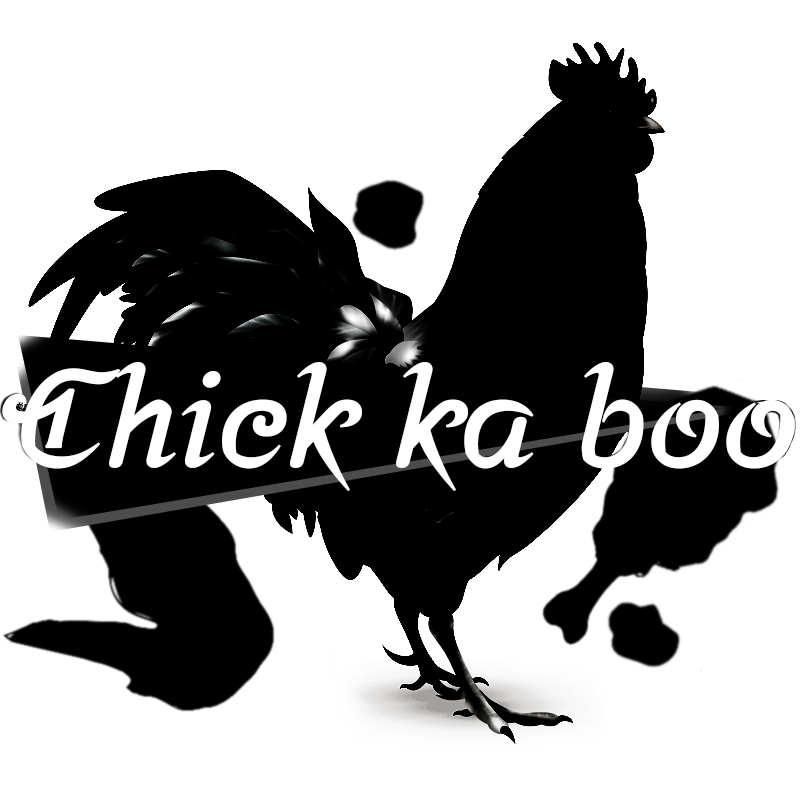
<style>
.page{position:relative;width:800px;height:800px;background:#ffffff}
.page>*{position:absolute;margin:0}
.t1{font:136px "Srisakdi-Bold";letter-spacing:-0.025em;color:#ffffff;font-weight:bold}
</style>
<div class="page">
<p class="t1" style="left:2px;top:362px;width:792px;height:129px">Chick ka boo</p>
</div>
